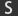
<style>
.page{position:relative;width:18px;height:16px;background:#333333}
.page>*{position:absolute;margin:0}
.t1{font:12px "AdobeHeitiStd-Regular";color:#e4e4e4}
</style>
<div class="page">
<p class="t1" style="left:4px;top:1px;width:9px;height:13px">S</p>
</div>
